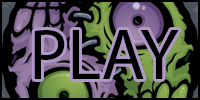
<style>
.page{position:relative;width:200px;height:100px;background:#000000}
.page>*{position:absolute;margin:0}
.t1{font:72px "MyriadPro-Regular";color:#000000}
</style>
<div class="page">
<p class="t1" style="left:34px;top:30px;width:145px;height:49px">PLAY</p>
</div>
